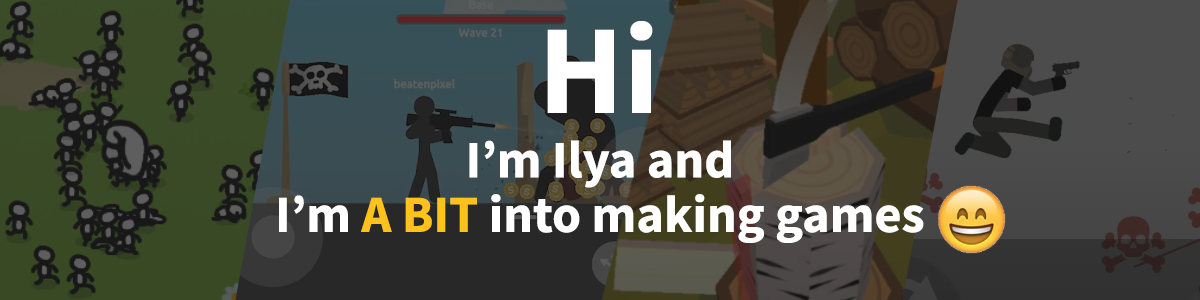
<style>
.page{position:relative;width:1200px;height:300px}
.page>*{position:absolute;margin:0}
.t1{font:127.3px "SourceSansPro-Bold";color:#ffffff}
.t2{font:52.3px/54.7px "SourceSansPro-Bold";color:#ffffff}
.t3{font:52.3px/54.7px "SourceSansPro-Bold";color:#ffc21d}
</style>
<div class="page">
<p class="t1" style="left:547px;top:21px;width:106px;height:92px">Hi</p>
<p class="t2" style="left:279px;top:140px;width:645px;height:103px;text-align:center">I’m Ilya and<br>I’m <span class="t3">A BIT</span> into making games</p>
</div>
